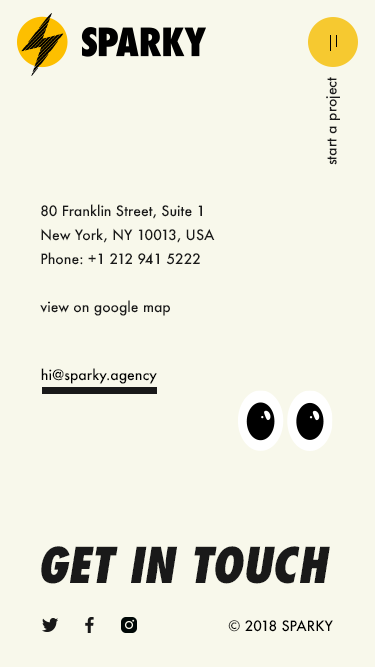
<style>
.page{position:relative;width:375px;height:667px;background:#f8f8eb}
.page>*{position:absolute;margin:0}
.t1{font:14px "Futura-Medium";color:#191919}
.t2{font:14px/24px "Futura-Medium";color:#191919}
.t3{font:14px "Futura-Medium";color:#000000}
.t4{font:48px "Futura-CondExtraBoldObl";color:#191919;text-transform:uppercase}
</style>
<div class="page">
<p class="t1" style="left:326px;top:77px;width:14px;height:88px;rotate:-90deg">start a project</p>
<p class="t2" style="left:40px;top:204px;width:175px;height:112px">80 Franklin Street, Suite 1<br>New York, NY 10013, USA<br>Phone: +1 212 941 5222<br><br>view on google map</p>
<p class="t3" style="left:41px;top:368px;width:116px;height:16px">hi@sparky.agency</p>
<p class="t4" style="left:41px;top:546px;width:289px;height:38px">get in touch</p>
<p class="t3" style="left:228px;top:620px;width:105px;height:12px">© 2018 SPARKY</p>
</div>
